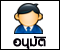
<style>
.page{position:relative;width:60px;height:50px;background:#ffffff}
.page>*{position:absolute;margin:0}
.t1{font:18px "PSLxKittithada-Bold";color:#040007;font-weight:bold}
</style>
<div class="page">
<p class="t1" style="left:13px;top:36px;width:33px;height:14px">อนุมัติ</p>
</div>
